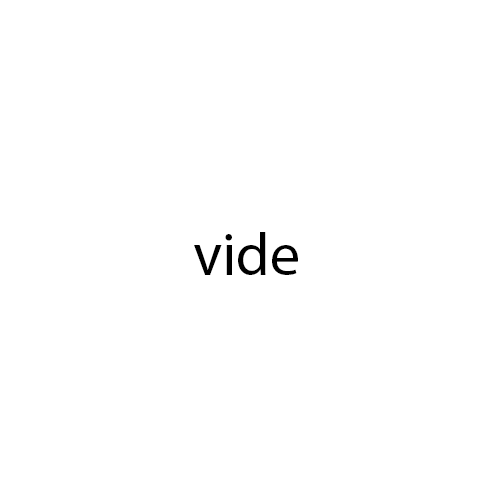
<style>
.page{position:relative;width:500px;height:500px;background:#ffffff}
.page>*{position:absolute;margin:0}
.t1{font:60px "MyriadPro-Regular";color:#000000}
</style>
<div class="page">
<p class="t1" style="left:194px;top:232px;width:104px;height:43px">vide</p>
</div>
